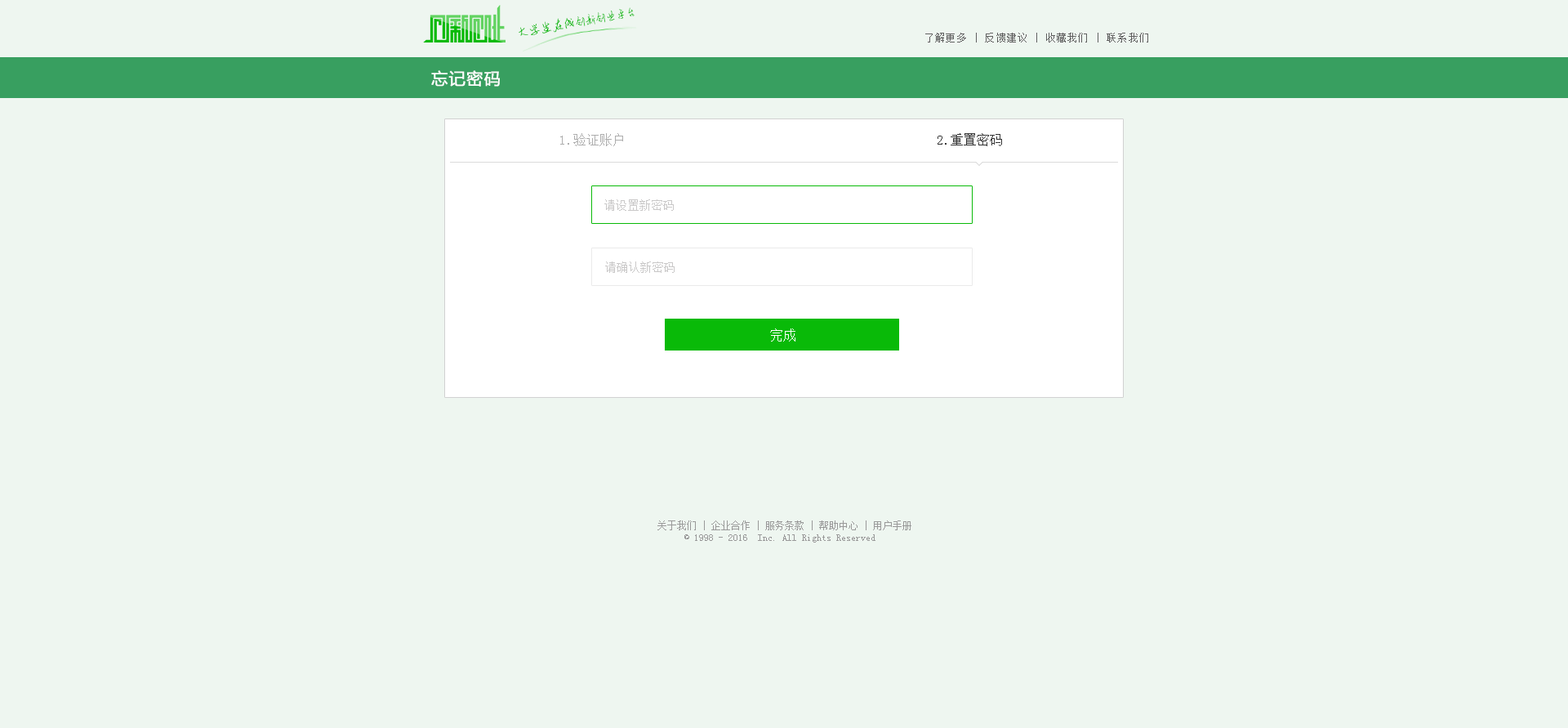
<style>
.page{position:relative;width:1568px;height:728px;background:#eef6f0}
.page>*{position:absolute;margin:0}
.t1{font:11.2px "AnJingCheng-Xing-2.0";letter-spacing:-0.01em;color:#09ba08}
.t2{font:12.6px "AnJingCheng-Xing-2.0";letter-spacing:-0.01em;color:#09ba08}
.t3{font:9.8px "SimSun";letter-spacing:0.1em;color:#606060}
.t4{font:16.3px "MicrosoftYaHei";letter-spacing:0.025em;color:#ffffff;font-weight:bold}
.t5{font:13.1px "SimSun";color:#adadad}
.t6{font:13.1px "SimSun";color:#333333}
.t7{font:11.4px "SimSun";color:#c9c8c8}
.t8{font:13.1px "SimSun";color:#ffffff}
.t9{font:9.8px "SimSun";color:#999999}
</style>
<div class="page">
<p class="t1" style="left:519px;top:7px;width:116px;height:29px;rotate:-10deg"><span class="t2">大学生在线</span>创新创业平台</p>
<p class="t3" style="left:925px;top:33px;width:223px;height:9px">了解更多 | 反馈建议 | 收藏我们 | 联系我们</p>
<p class="t4" style="left:431px;top:70px;width:69px;height:17px">忘记密码</p>
<p class="t5" style="left:560px;top:133px;width:63px;height:13px">1.验证账户</p>
<p class="t6" style="left:938px;top:133px;width:64px;height:13px">2.重置密码</p>
<p class="t7" style="left:604px;top:199px;width:70px;height:12px">请设置新密码</p>
<p class="t7" style="left:605px;top:261px;width:70px;height:12px">请确认新密码</p>
<p class="t8" style="left:770px;top:328px;width:25px;height:13px">完成</p>
<p class="t9" style="left:657px;top:520px;width:254px;height:22px;text-align:center">关于我们 | 企业合作 | 服务条款 | 帮助中心 | 用户手册<br>© 1998 - 2016  Inc. All Rights Reserved</p>
</div>
